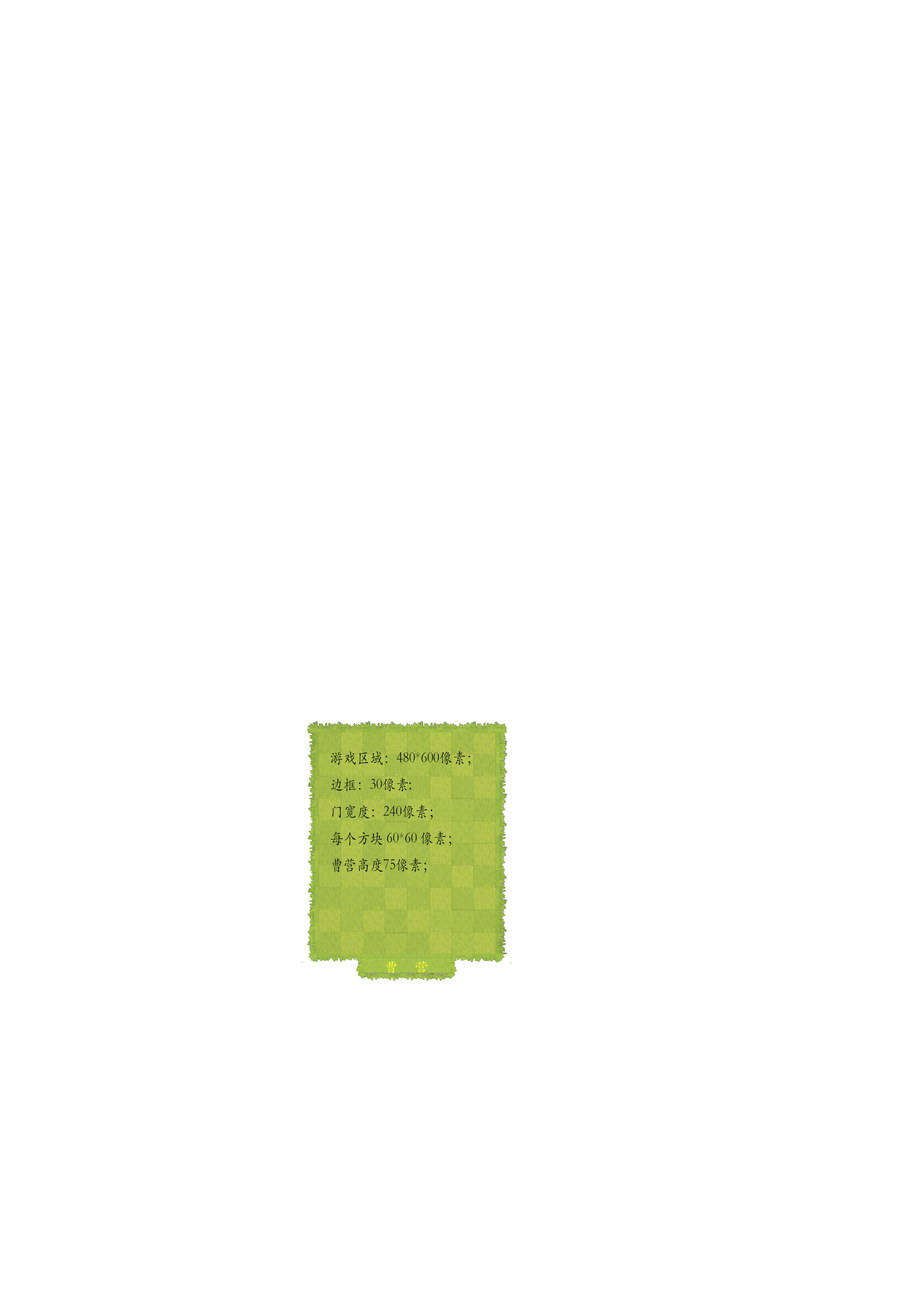
<style>
.page{position:relative;width:918px;height:1299px;background:#ffffff}
.page>*{position:absolute;margin:0}
.t1{font:15.3px "STKaiti";color:#010915;scale:0.87 1}
.t2{font:12.9px "STKaiti";color:#fefc2f;scale:1.19 1}
</style>
<div class="page">
<p class="t1" style="left:331px;top:751px;width:140px;height:122px">游戏区域：480*600像素；<br>边框：30像素;<br>门宽度：240像素；<br>每个方块 60*60 像素；<br>曹营高度75像素；</p>
<p class="t2" style="left:386px;top:961px;width:42px;height:12px">曹    营</p>
</div>
